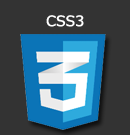
<style>
.page{position:relative;width:130px;height:135px;background:#333333}
.page>*{position:absolute;margin:0}
.t1{font:14.3px "MeiryoUI";color:#ffffff;font-weight:bold}
</style>
<div class="page">
<p class="t1" style="left:46px;top:15px;width:38px;height:12px">CSS3</p>
</div>
